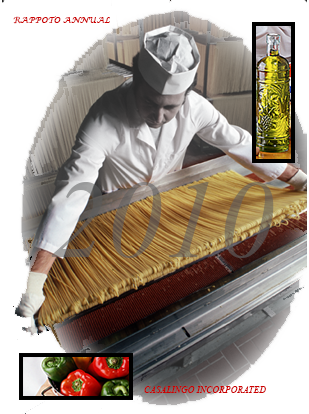
<style>
.page{position:relative;width:309px;height:414px;background:#ffffff}
.page>*{position:absolute;margin:0}
.t1{font:8.3px "LucidaCalligraphy-Italic";color:#cc0000}
.t2{font:112.2px "TimesNewRomanPS-ItalicMT"}
.t3{font:9.4px "TimesNewRomanPS-ItalicMT";color:#cc0000}
</style>
<div class="page">
<p class="t1" style="left:13px;top:16px;width:97px;height:8px">RAPPOTO ANNUAL</p>
<p class="t2" style="left:51px;top:182px;width:223px;height:76px">2010</p>
<p class="t3" style="left:144px;top:386px;width:122px;height:7px">CASALINGO INCORPORATED</p>
</div>
